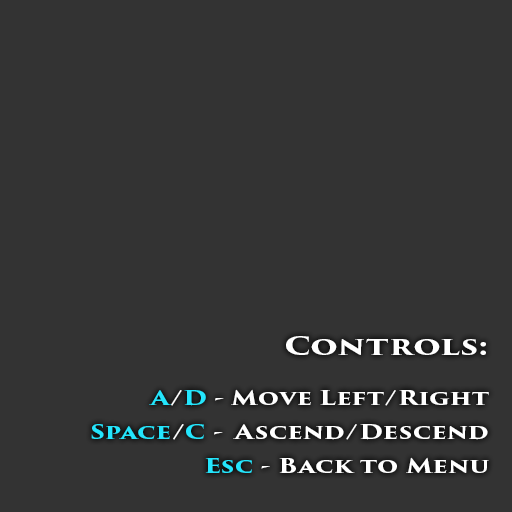
<style>
.page{position:relative;width:512px;height:512px;background:#333333}
.page>*{position:absolute;margin:0}
.t1{font:19.6px "TrajanPro3-Bold";color:#fefefe;scale:1.29 1}
.t2{font:25.2px "TrajanPro3-Bold";color:#ffffff;scale:1.29 1}
.t3{font:19.6px "TrajanPro3-Bold";color:#24e5fc;scale:1.29 1}
.t4{font:19.6px "TrajanPro3-Bold";color:#ffffff;scale:1.29 1}
</style>
<div class="page">
<p class="t1" style="left:91px;top:336px;width:398px;height:137px;text-align:right"><span class="t2">Controls:<br><br><br></span><span class="t3">A</span><span class="t4">/</span><span class="t3">D </span>- Move Left/Right<br><br><span class="t3">Space</span><span class="t4">/</span><span class="t3">C </span><span class="t4">-  Ascend/Descend<br><br></span><span class="t3">Esc </span><span class="t4">- Back to Menu</span></p>
</div>
